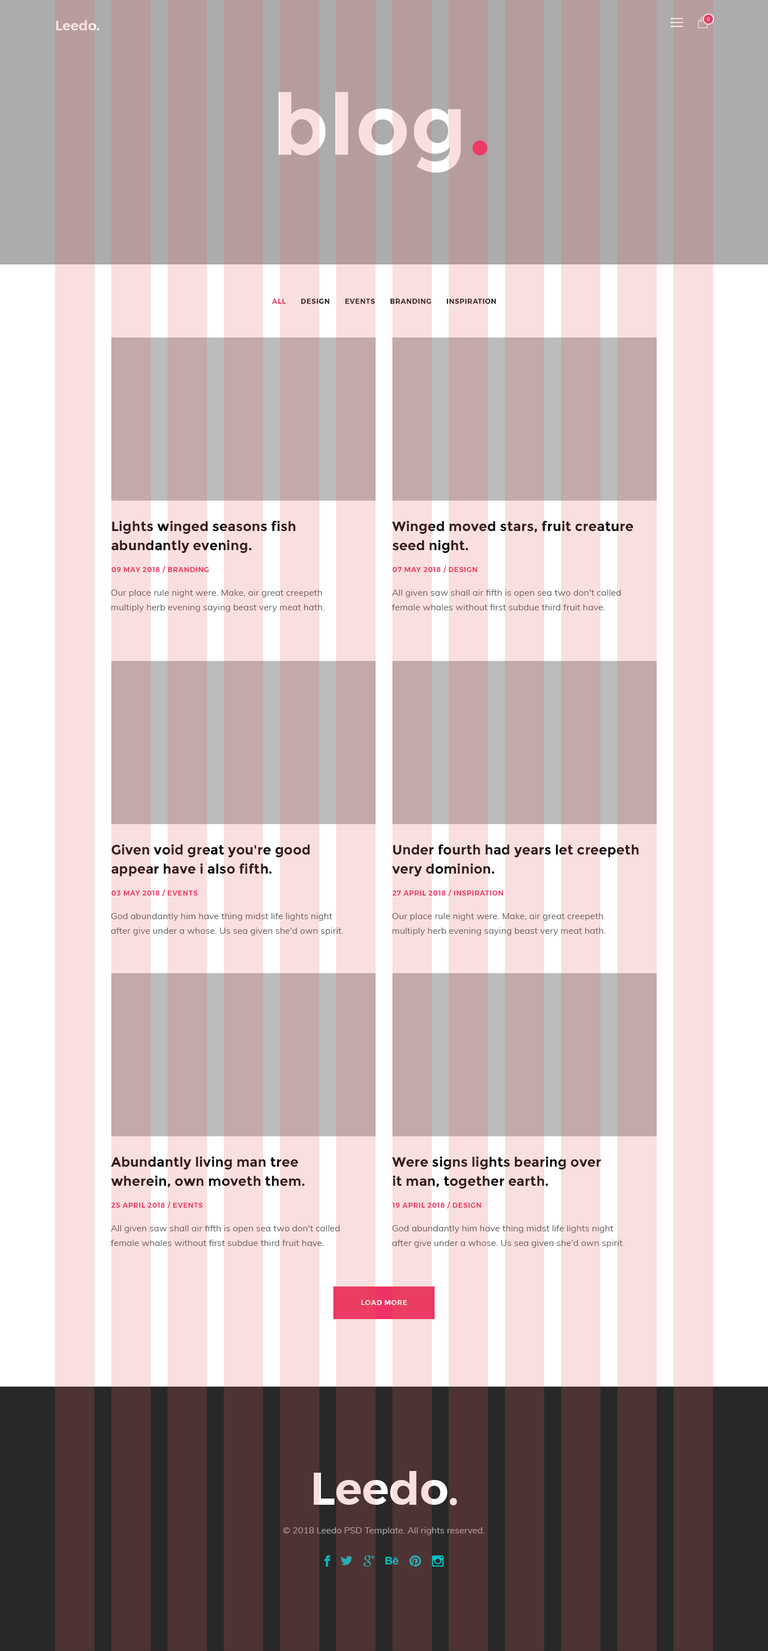
<style>
.page{position:relative;width:768px;height:1651px;background:#f9dfdf}
.page>*{position:absolute;margin:0}
.t1{font:4.5px "Montserrat-Medium";letter-spacing:0.05em;color:#f9dfdf;text-transform:uppercase}
.t2{font:13.5px "Montserrat-SemiBold";color:#f9dfdf}
.t3{font:84.4px "Montserrat-Bold";letter-spacing:0.01em;color:#f9dfdf}
.t4{font:6.8px "Montserrat-SemiBold";letter-spacing:0.075em;color:#351c1c;text-transform:uppercase}
.t5{font:13.5px/19.1px "Montserrat-Bold";letter-spacing:0.005em;color:#351c1c}
.t6{font:6.8px "Montserrat-SemiBold";letter-spacing:0.075em;color:#ee3364;text-transform:uppercase}
.t7{font:9px/14.6px "Muli-Regular";letter-spacing:0.005em;color:#765c5c}
.t8{font:6.8px "Montserrat-SemiBold";letter-spacing:0.075em;text-transform:uppercase}
.t9{font:45px "Montserrat-SemiBold";color:#f9dfdf}
.t10{font:9px "Muli-Regular";color:#a7a7a7}
</style>
<div class="page">
<p class="t1" style="left:707px;top:17px;width:3px;height:4px">0</p>
<p class="t2" style="left:56px;top:20px;width:44px;height:10px">Leedo.</p>
<p class="t3" style="left:278px;top:92px;width:210px;height:81px">blog.</p>
<p class="t4" style="left:272px;top:299px;width:224px;height:5px">all       design       events       branding       inspiration</p>
<p class="t5" style="left:111px;top:520px;width:185px;height:33px">Lights winged seasons fish <br>abundantly evening.</p>
<p class="t5" style="left:392px;top:520px;width:241px;height:33px">Winged moved stars, fruit creature <br>seed night.</p>
<p class="t6" style="left:111px;top:566px;width:98px;height:7px">09 may 2018 / branding</p>
<p class="t6" style="left:393px;top:566px;width:85px;height:7px">07 may 2018 / design</p>
<p class="t7" style="left:111px;top:590px;width:214px;height:23px">Our place rule night were. Make, air great creepeth <br>multiply herb evening saying beast very meat hath.</p>
<p class="t7" style="left:392px;top:590px;width:229px;height:20px">All given saw shall air fifth is open sea two don't called <br>female whales without first subdue third fruit have.</p>
<p class="t5" style="left:111px;top:844px;width:199px;height:32px">Given void great you're good <br>appear have i also fifth.</p>
<p class="t5" style="left:392px;top:844px;width:247px;height:32px">Under fourth had years let creepeth <br>very dominion.</p>
<p class="t6" style="left:111px;top:889px;width:87px;height:7px">03 may 2018 / events</p>
<p class="t6" style="left:393px;top:889px;width:110px;height:7px">27 april 2018 / inspiration</p>
<p class="t7" style="left:111px;top:913px;width:233px;height:22px">God abundantly him have thing midst life lights night <br>after give under a whose. Us sea given she'd own spirit.</p>
<p class="t7" style="left:392px;top:913px;width:214px;height:23px">Our place rule night were. Make, air great creepeth <br>multiply herb evening saying beast very meat hath.</p>
<p class="t5" style="left:111px;top:1156px;width:194px;height:31px">Abundantly living man tree <br>wherein, own moveth them.</p>
<p class="t5" style="left:392px;top:1156px;width:209px;height:33px">Were signs lights bearing over <br>it man, together earth.</p>
<p class="t6" style="left:111px;top:1202px;width:92px;height:6px">25 april 2018 / events</p>
<p class="t6" style="left:392px;top:1202px;width:90px;height:6px">19 april 2018 / design</p>
<p class="t7" style="left:111px;top:1225px;width:229px;height:21px">All given saw shall air fifth is open sea two don't called <br>female whales without first subdue third fruit have.</p>
<p class="t7" style="left:392px;top:1225px;width:233px;height:23px">God abundantly him have thing midst life lights night <br>after give under a whose. Us sea given she'd own spirit.</p>
<p class="t8" style="left:361px;top:1300px;width:46px;height:5px">load more</p>
<p class="t9" style="left:314px;top:1471px;width:143px;height:34px">Leedo.</p>
<p class="t10" style="left:283px;top:1527px;width:202px;height:8px">© 2018 Leedo PSD Template. All rights reserved.</p>
</div>
